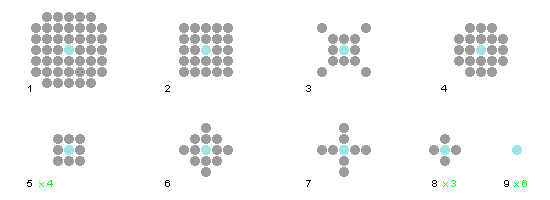
<style>
.page{position:relative;width:550px;height:200px;background:#ffffff}
.page>*{position:absolute;margin:0}
.t1{font:10px "ArialMT";color:#000000}
.t2{font:10px "ArialMT";color:#02fe14}
</style>
<div class="page">
<p class="t1" style="left:28px;top:85px;width:419px;height:7px">1                                            2                                             3                                           4</p>
<p class="t1" style="left:27px;top:180px;width:482px;height:7px">5                                            6                                             7                                        8                      9</p>
<p class="t2" style="left:39px;top:180px;width:488px;height:7px">x 4                                                                                                                                  x 3                   x 6</p>
</div>
